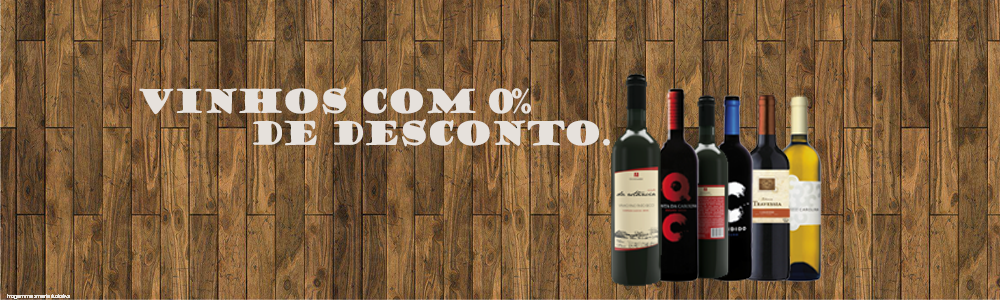
<style>
.page{position:relative;width:1000px;height:300px}
.page>*{position:absolute;margin:0}
.t1{font:32px/32px "GoudyStout";letter-spacing:-0.1em;color:#e6e1dc}
.t2{font:6px "ArialMT";letter-spacing:-0.1em;color:#e6e1dc}
</style>
<div class="page">
<p class="t1" style="left:139px;top:87px;width:471px;height:60px;text-align:center">vINHOS COM 0% <br>     DE DESCONTO.</p>
<p class="t2" style="left:7px;top:294px;width:63px;height:5px">Imagem meramente ilustrativa</p>
</div>
